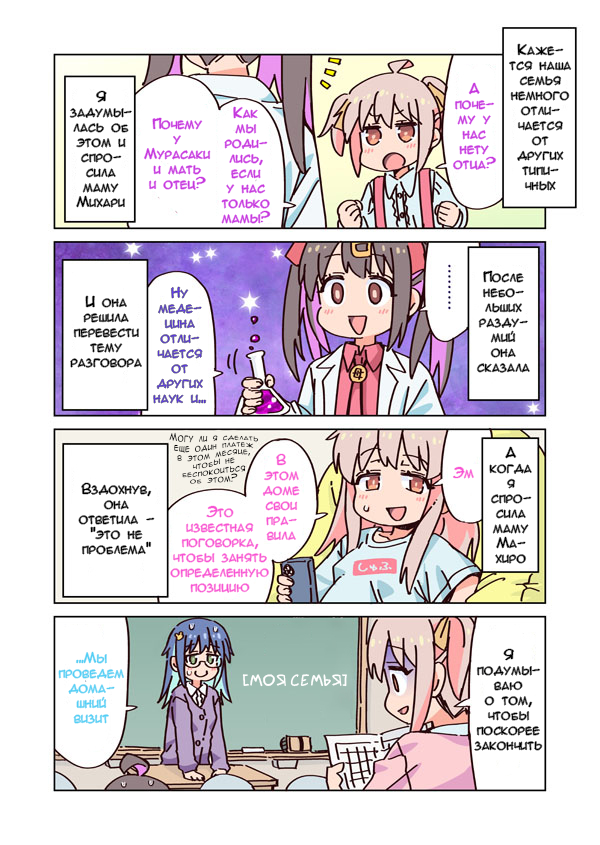
<style>
.page{position:relative;width:600px;height:845px;background:#ffffff}
.page>*{position:absolute;margin:0}
.t1{font:12.5px "AnimeAcev3";color:#000000}
.t2{font:12.5px "AnimeAcev3";color:#c539dd}
.t3{font:12.5px "AnimeAcev3";color:#5938d6}
.t4{font:8.3px/8.3px "AnimeAcev3";color:#000000}
.t5{font:12.5px "AnimeAcev3";color:#f750d6}
.t6{font:12.5px "AnimeAcev3";color:#50d0f7}
.t7{font:16.7px "SuperWebcomicBros.Rusbyyakustick";color:#ffffff}
</style>
<div class="page">
<p class="t1" style="left:509px;top:44px;width:62px;height:147px;text-align:center">Каже-<br>тся наша<br>семья<br>немного<br>отли-<br>чается<br>от<br>других<br>типи-<br>чных</p>
<p class="t2" style="left:453px;top:83px;width:43px;height:87px;text-align:center">А<br>поче-<br>му у<br>нас<br>нету<br>отца?</p>
<p class="t1" style="left:70px;top:91px;width:62px;height:117px;text-align:center">Я<br>задумы-<br>лась об<br>этом и<br>спро-<br>сила<br>маму<br>Михари</p>
<p class="t2" style="left:221px;top:107px;width:49px;height:117px;text-align:center">Как<br>мы<br>роди-<br>лись,<br>если<br>у нас<br>только<br>мамы?</p>
<p class="t2" style="left:144px;top:118px;width:66px;height:72px;text-align:center">Почему<br>у<br>Мурасаки<br>и мать<br>и отец?</p>
<p class="t1" style="left:477px;top:271px;width:53px;height:102px;text-align:center">После<br>небо-<br>льших<br>разду-<br>мий<br>она<br>сказала</p>
<p class="t3" style="left:153px;top:287px;width:53px;height:117px;text-align:center">Ну<br>меде-<br>цина<br>отли-<br>чается<br>от<br>других<br>наук и...</p>
<p class="t1" style="left:70px;top:296px;width:72px;height:72px;text-align:center">И она<br>решила<br>перевести<br>тему<br>разговора</p>
<p class="t4" style="left:169px;top:432px;width:90px;height:52px;text-align:center">Могу ли я сделать<br>еще один платеж<br>в этом месяце,<br>чтобы не<br>беспокоиться<br>об этом?</p>
<p class="t1" style="left:489px;top:447px;width:43px;height:117px;text-align:center">А<br>когда<br>я<br>спро-<br>сила<br>маму<br>Ма-<br>хиро</p>
<p class="t5" style="left:263px;top:454px;width:37px;height:87px;text-align:center">В<br>этом<br>доме<br>свои<br>пра-<br>вила</p>
<p class="t5" style="left:453px;top:467px;width:21px;height:12px">Эм</p>
<p class="t1" style="left:78px;top:483px;width:76px;height:72px;text-align:center">Вздохнув,<br>она<br>ответила -<br>"это не<br>проблема"</p>
<p class="t5" style="left:170px;top:506px;width:99px;height:87px;text-align:center">Это<br>известная<br>поговорка,<br>чтобы занять<br>определенную<br>позицию</p>
<p class="t6" style="left:58px;top:652px;width:66px;height:72px;text-align:center">...Мы<br>проведем<br>дома-<br>шний<br>визит</p>
<p class="t1" style="left:474px;top:649px;width:68px;height:102px;text-align:center">Я<br>подумы-<br>ваю<br>о том,<br>чтобы<br>поскорее<br>закончить</p>
<p class="t7" style="left:242px;top:674px;width:105px;height:13px">[Моя семья]</p>
</div>
